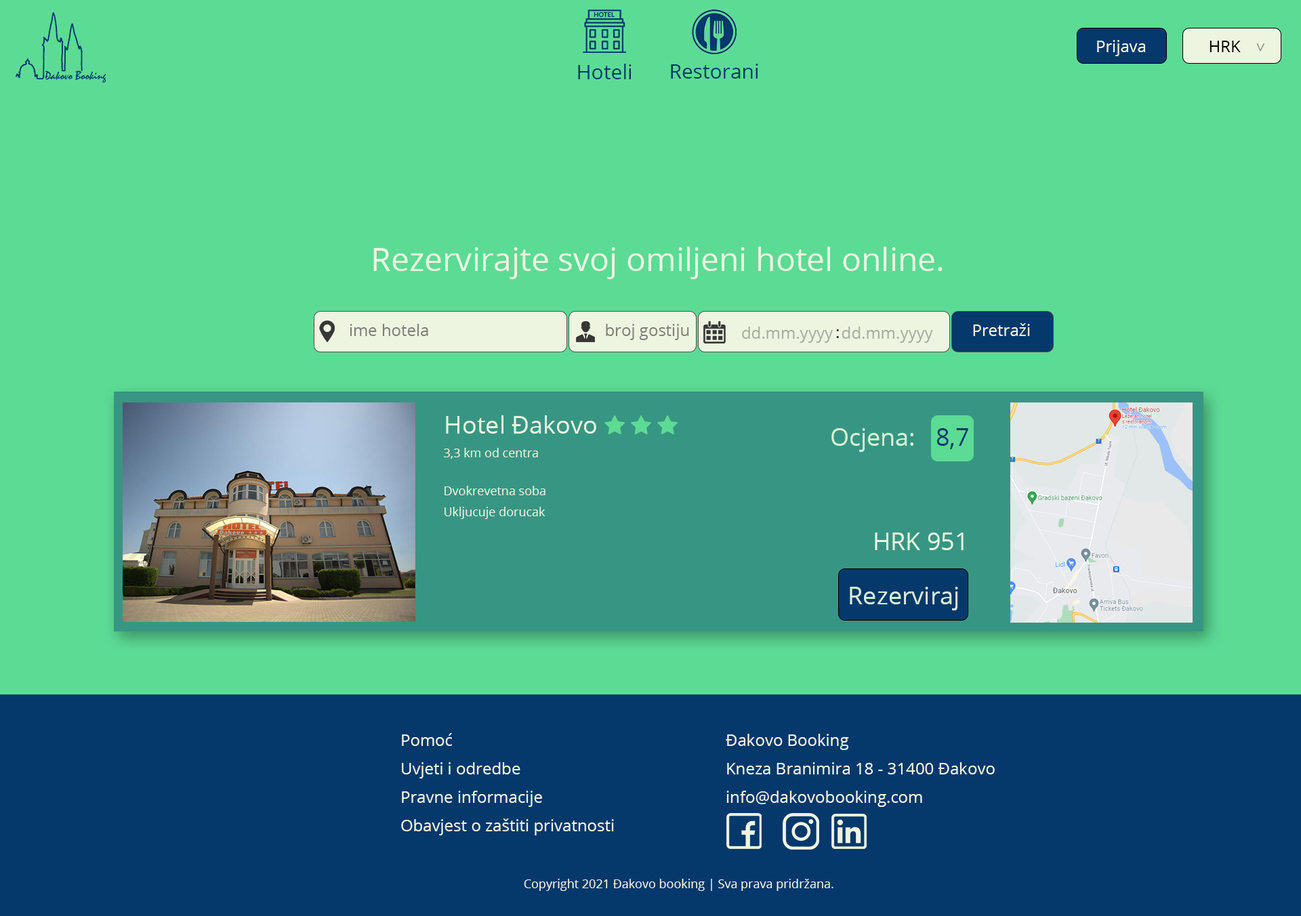
<style>
.page{position:relative;width:1301px;height:916px;background:#5cdb95}
.page>*{position:absolute;margin:0}
.t1{font:16.3px "OpenSans";color:#edf5e1}
.t2{font:16.3px "OpenSans";color:#000000}
.t3{font:16.3px "OpenSans";color:#8d8d8d}
.t4{font:20.3px "OpenSans";color:#05386b}
.t5{font:32.5px "OpenSans";color:#edf5e1}
.t6{font:16.3px "OpenSans";color:#7d8077}
.t7{font:16.3px "OpenSans";color:#a7ac9f}
.t8{font:24.4px "OpenSans";color:#eaf5df}
.t9{font:24.4px "OpenSans";color:#d7f1d5}
.t10{font:24.4px "OpenSans";color:#05386b}
.t11{font:12.2px "OpenSans";color:#eaf5df}
.t12{font:12.2px "OpenSans";color:#edf5e1}
</style>
<div class="page">
<p class="t1" style="left:1097px;top:40px;width:48px;height:16px">Prijava</p>
<p class="t2" style="left:1210px;top:41px;width:31px;height:11px">HRK</p>
<p class="t3" style="left:1257px;top:43px;width:8px;height:9px;rotate:90deg">&gt;</p>
<p class="t4" style="left:578px;top:64px;width:54px;height:15px">Hoteli</p>
<p class="t4" style="left:671px;top:64px;width:87px;height:15px">Restorani</p>
<p class="t5" style="left:373px;top:247px;width:570px;height:32px">Rezervirajte svoj omiljeni hotel online.</p>
<p class="t6" style="left:350px;top:324px;width:78px;height:12px">ime hotela</p>
<p class="t6" style="left:606px;top:324px;width:83px;height:16px">broj gostiju</p>
<p class="t7" style="left:742px;top:327px;width:191px;height:16px">dd.mm.yyyy  dd.mm.yyyy</p>
<p class="t2" style="left:836px;top:329px;width:3px;height:9px">:</p>
<p class="t1" style="left:973px;top:323px;width:57px;height:13px">Pretraži</p>
<p class="t8" style="left:446px;top:415px;width:150px;height:19px">Hotel Đakovo</p>
<p class="t9" style="left:832px;top:428px;width:82px;height:24px">Ocjena:</p>
<p class="t10" style="left:937px;top:428px;width:32px;height:21px">8,7</p>
<p class="t11" style="left:444px;top:448px;width:94px;height:11px">3,3 km od centra</p>
<p class="t11" style="left:445px;top:486px;width:101px;height:33px">Dvokrevetna soba <br>Ukljucuje dorucak</p>
<p class="t8" style="left:875px;top:533px;width:89px;height:17px">HRK 951</p>
<p class="t9" style="left:850px;top:587px;width:108px;height:24px">Rezerviraj</p>
<p class="t1" style="left:401px;top:733px;width:213px;height:103px">Pomoć<br>Uvjeti i odredbe<br>Pravne informacije<br>Obavjest o zaštiti privatnosti</p>
<p class="t1" style="left:726px;top:734px;width:269px;height:73px">Đakovo Booking<br>Kneza Branimira 18 - 31400 Đakovo<br>info@dakovobooking.com</p>
<p class="t12" style="left:524px;top:879px;width:310px;height:12px">Copyright 2021 Đakovo booking | Sva prava pridržana.</p>
</div>
